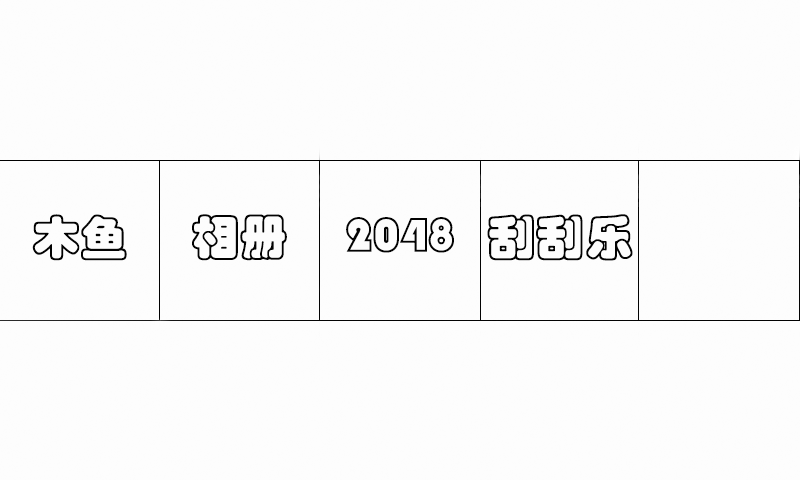
<style>
.page{position:relative;width:800px;height:480px;background:#fdfdfd}
.page>*{position:absolute;margin:0}
.t1{font:48px "STCaiyun";color:#020202}
</style>
<div class="page">
<p class="t1" style="left:32px;top:214px;width:95px;height:47px">木鱼</p>
<p class="t1" style="left:192px;top:214px;width:95px;height:47px">相册</p>
<p class="t1" style="left:346px;top:217px;width:108px;height:36px">2048</p>
<p class="t1" style="left:487px;top:214px;width:146px;height:47px">刮刮乐</p>
</div>
